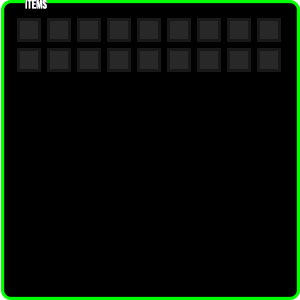
<style>
.page{position:relative;width:300px;height:300px;background:#000000}
.page>*{position:absolute;margin:0}
.t1{font:12px "BebasNeue-Regular";color:#ffffff}
</style>
<div class="page">
<p class="t1" style="left:25px;top:0px;width:22px;height:9px">Items</p>
</div>
